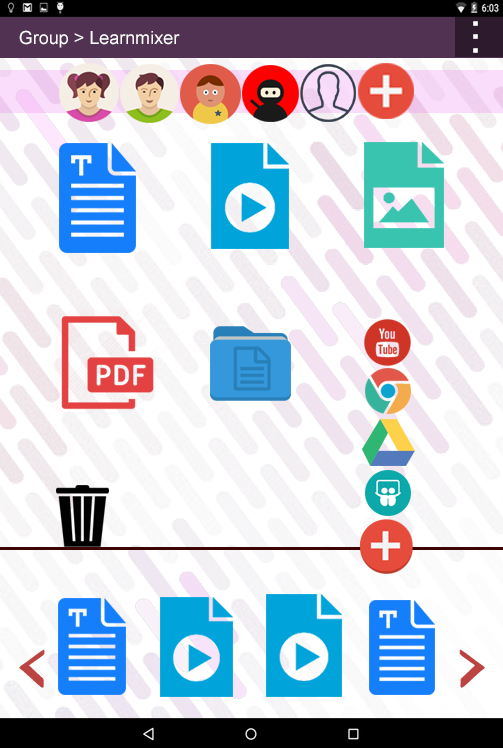
<style>
.page{position:relative;width:503px;height:748px;background:#ffffff}
.page>*{position:absolute;margin:0}
.t1{font:18px "ArialMT";color:#ffffff}
.t2{font:47.9px "ArialMT";color:#ffffff}
.t3{font:72px "GoudyStout";color:#bd4242}
</style>
<div class="page">
<p class="t1" style="left:19px;top:30px;width:161px;height:18px">Group &gt; Learnmixer</p>
<p class="t2" style="left:473px;top:21px;width:5px;height:32px;rotate:90deg">...</p>
<p class="t3" style="left:19px;top:649px;width:26px;height:39px">&lt;</p>
<p class="t3" style="left:459px;top:649px;width:26px;height:39px;rotate:180deg">&lt;</p>
</div>
